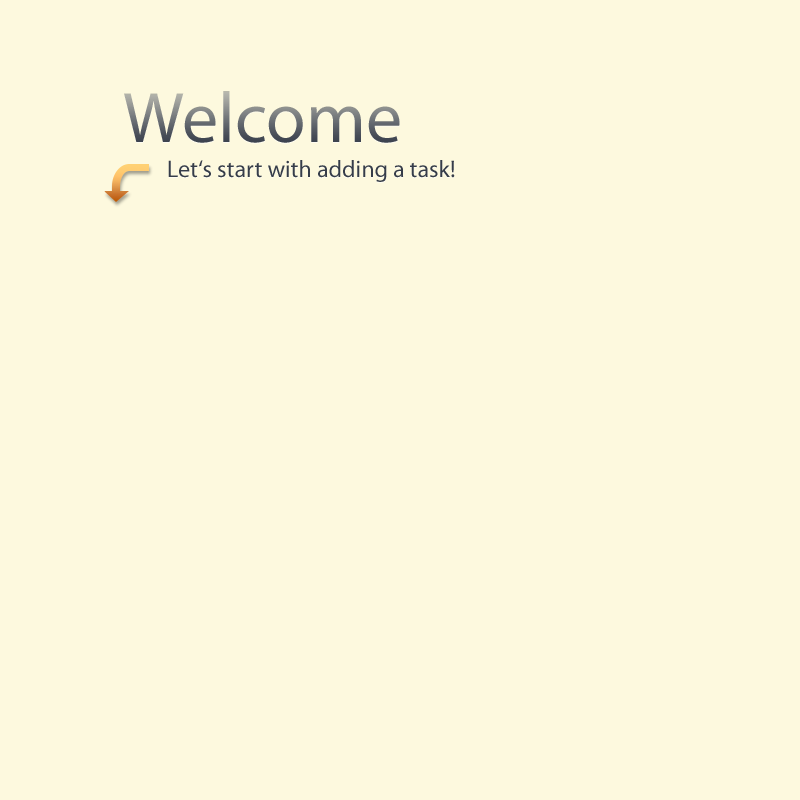
<style>
.page{position:relative;width:800px;height:800px;background:#fdf9de}
.page>*{position:absolute;margin:0}
.t1{font:72px "MyriadPro-Regular"}
.t2{font:24px "MyriadPro-Regular";color:#363d49}
</style>
<div class="page">
<p class="t1" style="left:124px;top:91px;width:276px;height:52px">Welcome</p>
<p class="t2" style="left:168px;top:160px;width:287px;height:22px">Let‘s start with adding a task!</p>
</div>
